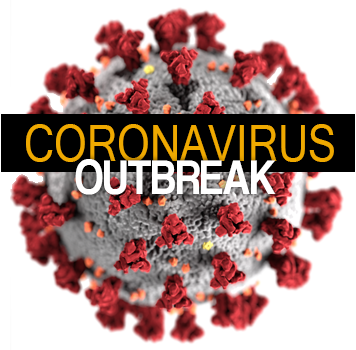
<style>
.page{position:relative;width:356px;height:350px;background:#ffffff}
.page>*{position:absolute;margin:0}
.t1{font:50.4px "MicrosoftSansSerif";color:#efa900;scale:0.83 1}
.t2{font:50.4px "CoolveticaRg-Regular";letter-spacing:0.01em;color:#ffffff;scale:0.83 1}
</style>
<div class="page">
<p class="t1" style="left:26px;top:124px;width:308px;height:38px">CORONAVIRUS</p>
<p class="t2" style="left:75px;top:159px;width:201px;height:36px">OUTBREAK</p>
</div>
